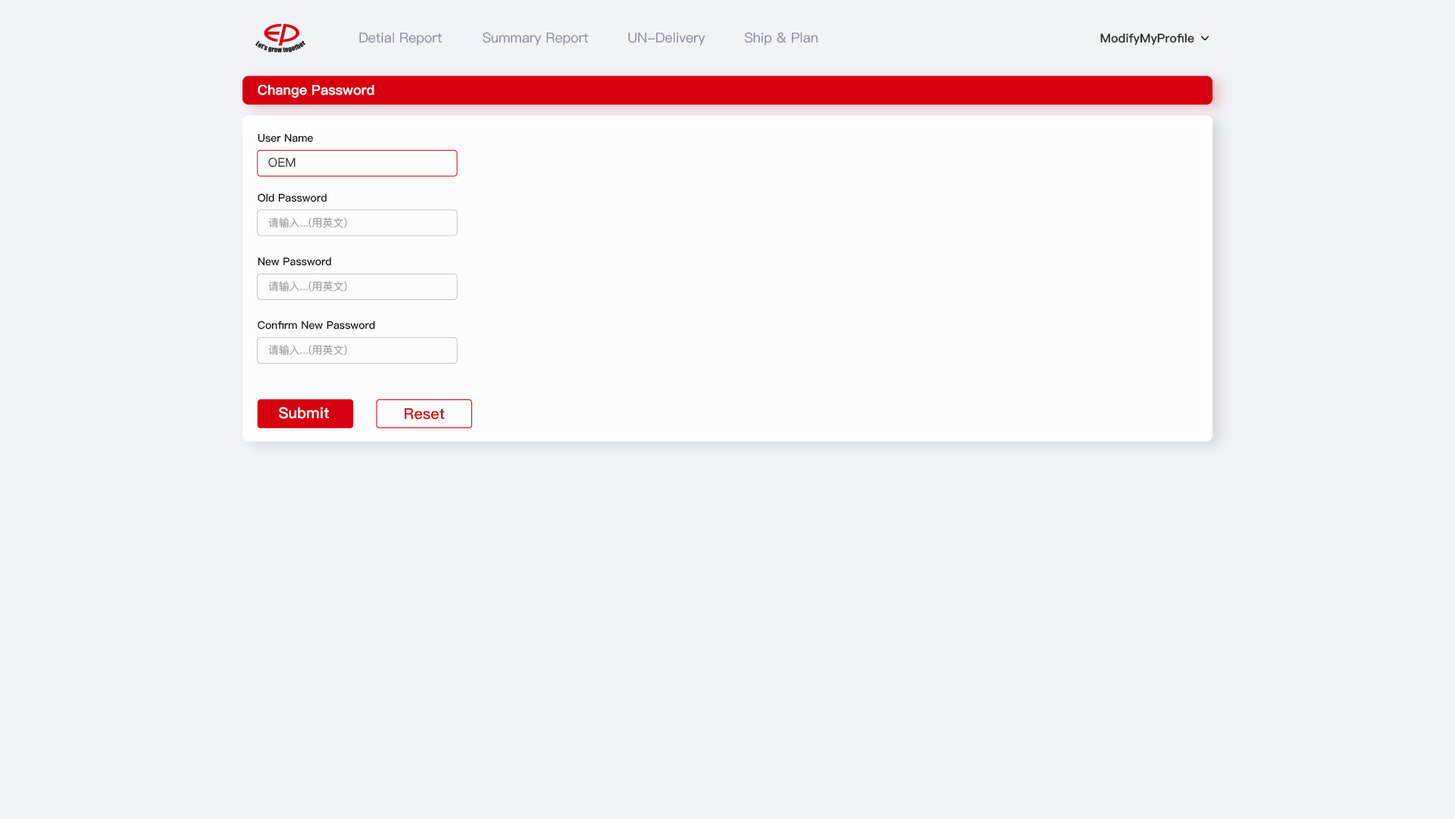
<style>
.page{position:relative;width:1455px;height:819px;background:#f2f3f7}
.page>*{position:absolute;margin:0}
.t1{font:13.6px "PingFang-SC-Medium";color:#87889e}
.t2{font:12.1px "PingFang-SC-Heavy";color:#2b2d2d}
.t3{font:13.6px "PingFang-SC-Heavy";color:#ffffff}
.t4{font:10.6px "PingFang-SC-Bold";color:#0b0a0a}
.t5{font:12.1px "PingFang-SC-Medium";color:#2b2d2d}
.t6{font:10.6px "PingFang-SC-Medium";color:#9b9b9b}
.t7{font:15.2px "PingFang-SC-Heavy";color:#ffffff}
.t8{font:15.2px "PingFang-SC-Heavy";color:#d60010}
</style>
<div class="page">
<p class="t1" style="left:359px;top:33px;width:84px;height:12px">Detial Report</p>
<p class="t1" style="left:483px;top:32px;width:106px;height:13px">Summary Report</p>
<p class="t1" style="left:628px;top:32px;width:78px;height:13px">UN-Delivery</p>
<p class="t1" style="left:744px;top:32px;width:74px;height:13px">Ship &amp; Plan</p>
<p class="t2" style="left:1101px;top:33px;width:94px;height:12px">ModifyMyProfile</p>
<p class="t3" style="left:258px;top:84px;width:116px;height:14px">Change Password</p>
<p class="t4" style="left:258px;top:133px;width:55px;height:9px">User Name</p>
<p class="t5" style="left:268px;top:158px;width:28px;height:10px">OEM</p>
<p class="t4" style="left:258px;top:193px;width:69px;height:9px">Old Password</p>
<p class="t6" style="left:268px;top:218px;width:79px;height:10px">请输入...(用英文)</p>
<p class="t4" style="left:258px;top:257px;width:73px;height:9px">New Password</p>
<p class="t6" style="left:268px;top:281px;width:79px;height:11px">请输入...(用英文)</p>
<p class="t4" style="left:258px;top:321px;width:117px;height:9px">Confirm New Password</p>
<p class="t6" style="left:268px;top:345px;width:79px;height:10px">请输入...(用英文)</p>
<p class="t7" style="left:279px;top:407px;width:50px;height:12px">Submit</p>
<p class="t8" style="left:405px;top:408px;width:40px;height:12px">Reset</p>
</div>
